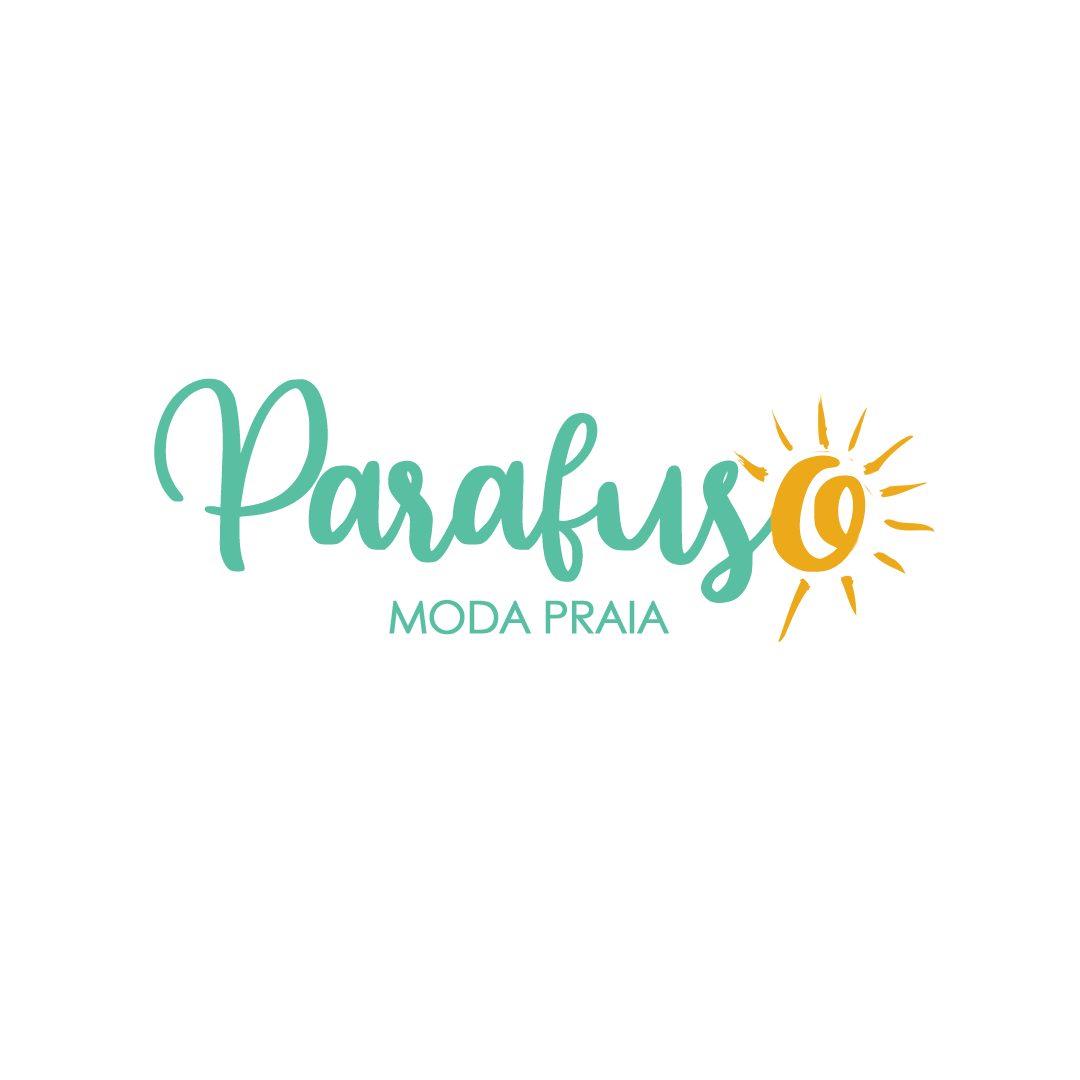
<style>
.page{position:relative;width:1080px;height:1080px;background:#ffffff}
.page>*{position:absolute;margin:0}
.t1{font:204.9px "Beyonce";letter-spacing:-0.045em;color:#58bfa3;font-weight:bold}
.t2{font:44.8px "CenturyGothic";letter-spacing:-0.045em;color:#58bfa3;font-weight:bold}
</style>
<div class="page">
<p class="t1" style="left:154px;top:378px;width:727px;height:225px">Parafuso</p>
<p class="t2" style="left:389px;top:600px;width:280px;height:35px">MODA PRAIA</p>
</div>
